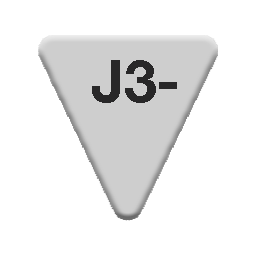
<style>
.page{position:relative;width:256px;height:256px;background:#ffffff}
.page>*{position:absolute;margin:0}
.t1{font:58.6px "HelveticaNeue-Bold";color:#282728}
</style>
<div class="page">
<p class="t1" style="left:92px;top:60px;width:85px;height:43px">J3-</p>
</div>
